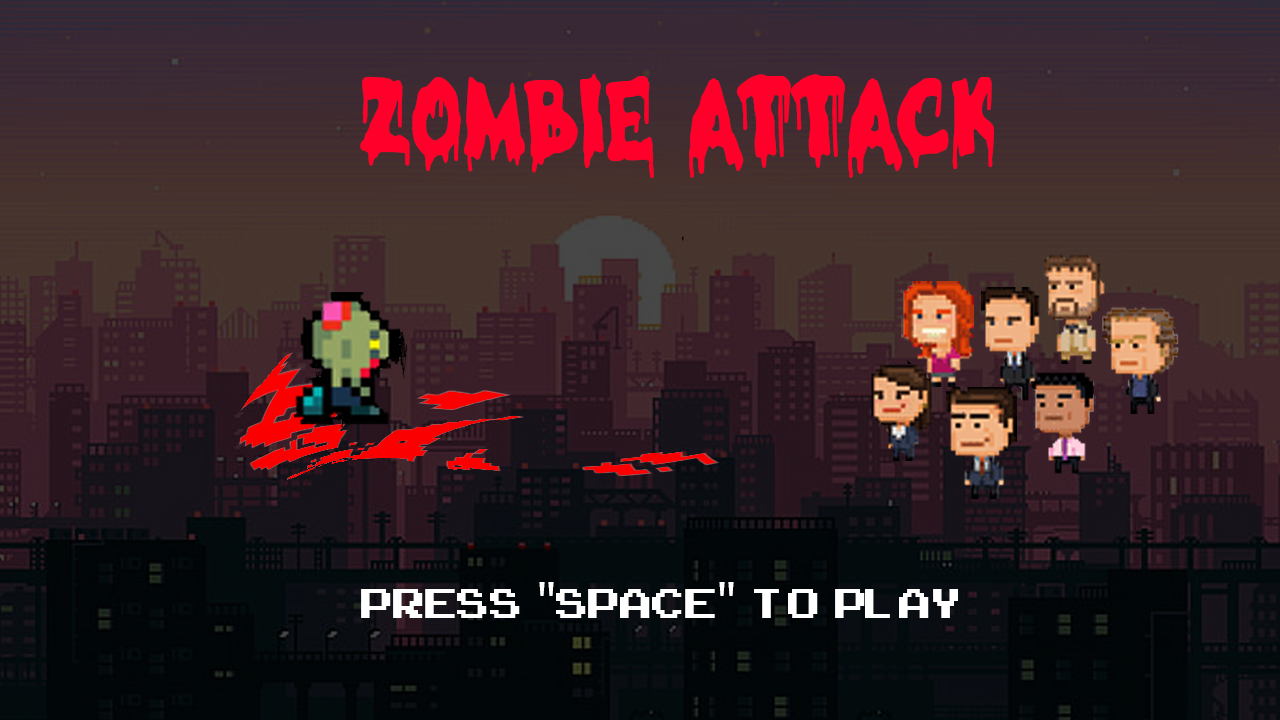
<style>
.page{position:relative;width:1280px;height:720px}
.page>*{position:absolute;margin:0}
.t1{font:125px "HalloweenMorning";color:#ff002b}
.t2{font:58.3px "ArcadeClassic";color:#ffffff}
.t3{font:58.3px "MyriadPro-Regular";color:#ffffff}
</style>
<div class="page">
<p class="t1" style="left:360px;top:73px;width:634px;height:105px">Zombie Attack</p>
<p class="t2" style="left:361px;top:582px;width:597px;height:36px">Press  <span class="t3">"</span>space<span class="t3">" </span> to  play</p>
</div>
